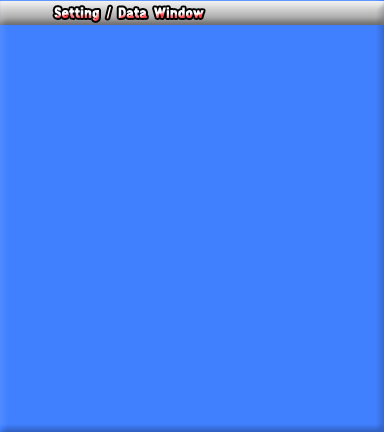
<style>
.page{position:relative;width:384px;height:432px;background:#4080ff}
.page>*{position:absolute;margin:0}
.t1{font:14px "GothicXB-HM"}
</style>
<div class="page">
<p class="t1" style="left:54px;top:6px;width:150px;height:15px">Setting / Data Window</p>
</div>
